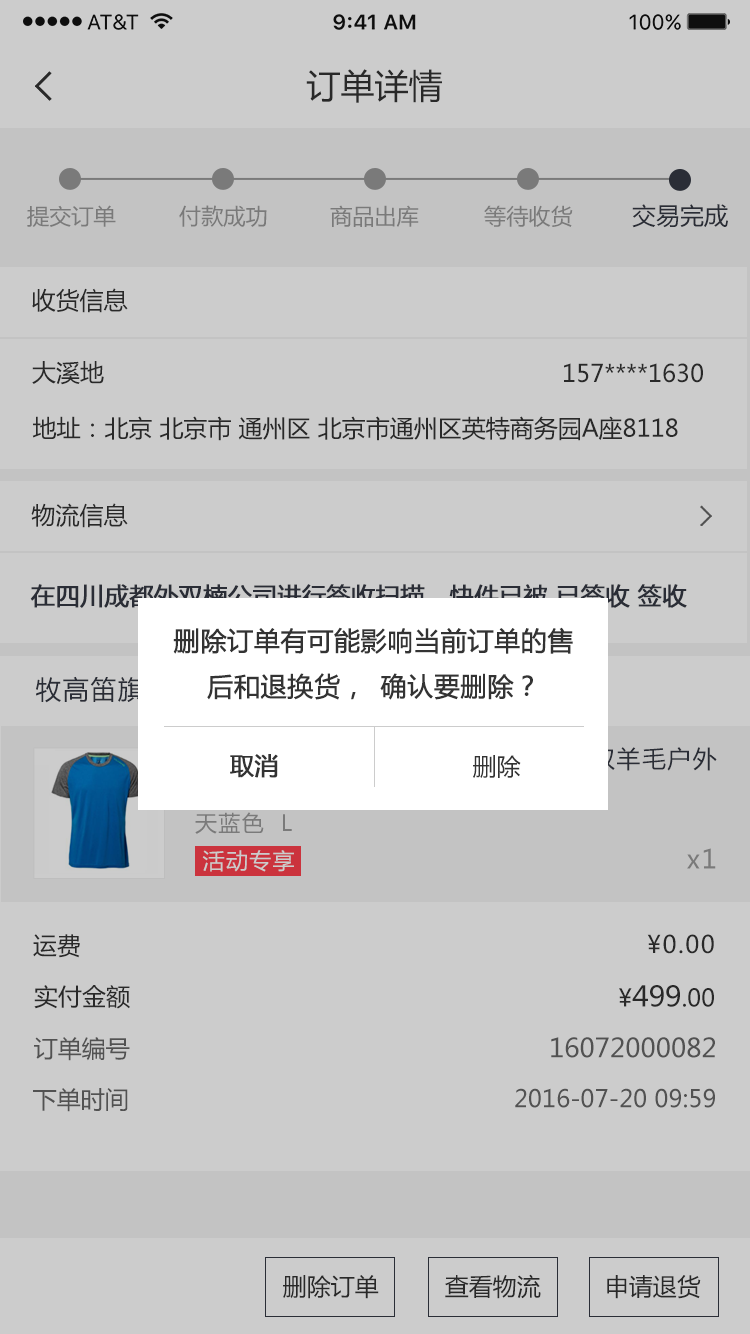
<style>
.page{position:relative;width:750px;height:1334px;background:#cccccc}
.page>*{position:absolute;margin:0}
.t1{font:34px "MicrosoftYaHei";color:#333333}
.t2{font:22px "MicrosoftYaHei";color:#7a7a7a}
.t3{font:23.8px "MicrosoftYaHei";color:#343843}
.t4{font:24px "MicrosoftYaHei";color:#333333}
.t5{font:24px "MicrosoftYaHei";color:#343843;font-weight:bold}
.t6{font:26px "MicrosoftYaHei";color:#333333;font-weight:bold}
.t7{font:26px "MicrosoftYaHei";letter-spacing:0.06em;color:#343843}
.t8{font:24px "MicrosoftYaHei";color:#333333;font-weight:bold}
.t9{font:22px "MicrosoftYaHei";letter-spacing:0.06em;color:#7a7a7a}
.t10{font:22px "MicrosoftYaHei";letter-spacing:0.06em;color:#cccccc}
.t11{font:26px "MicrosoftYaHei";letter-spacing:0.06em;color:#7a7a7a}
.t12{font:24px "MicrosoftYaHei";letter-spacing:0.06em;color:#333333}
.t13{font:28px "MicrosoftYaHei";color:#333333}
.t14{font:24px "MicrosoftYaHei";color:#666666}
.t15{font:26px "MicrosoftYaHei";color:#666666}
</style>
<div class="page">
<p class="t1" style="left:306px;top:69px;width:136px;height:34px">订单详情</p>
<p class="t2" style="left:27px;top:205px;width:89px;height:22px">提交订单</p>
<p class="t2" style="left:179px;top:205px;width:88px;height:22px">付款成功</p>
<p class="t2" style="left:330px;top:205px;width:89px;height:22px">商品出库</p>
<p class="t2" style="left:484px;top:205px;width:89px;height:22px">等待收货</p>
<p class="t3" style="left:632px;top:204px;width:96px;height:24px">交易完成</p>
<p class="t4" style="left:32px;top:288px;width:96px;height:25px">收货信息</p>
<p class="t4" style="left:32px;top:361px;width:72px;height:24px">大溪地</p>
<p class="t4" style="left:564px;top:363px;width:139px;height:20px">157****1630</p>
<p class="t4" style="left:32px;top:416px;width:646px;height:25px">地址：北京 北京市 通州区 北京市通州区英特商务园A座8118</p>
<p class="t4" style="left:31px;top:503px;width:97px;height:25px">物流信息</p>
<p class="t5" style="left:30px;top:584px;width:657px;height:24px">在四川成都外双楠公司进行签收扫描，快件已被 已签收 签收</p>
<p class="t6" style="left:173px;top:627px;width:400px;height:73px;text-align:center">删除订单有可能影响当前订单的售<br>后和退换货，确认要删除？</p>
<p class="t7" style="left:36px;top:676px;width:163px;height:27px">牧高笛旗舰店</p>
<p class="t8" style="left:230px;top:754px;width:48px;height:24px">取消</p>
<p class="t4" style="left:473px;top:755px;width:48px;height:23px">删除</p>
<p class="t9" style="left:195px;top:812px;width:97px;height:22px">天蓝色  L</p>
<p class="t10" style="left:202px;top:850px;width:92px;height:22px">活动专享</p>
<p class="t11" style="left:687px;top:848px;width:29px;height:21px">x1</p>
<p class="t4" style="left:33px;top:934px;width:47px;height:24px">运费</p>
<p class="t12" style="left:647px;top:934px;width:67px;height:20px">¥0.00</p>
<p class="t4" style="left:34px;top:985px;width:96px;height:24px">实付金额</p>
<p class="t13" style="left:619px;top:985px;width:95px;height:22px"><span class="t4">¥</span>499<span class="t4">.00</span></p>
<p class="t14" style="left:34px;top:1037px;width:96px;height:24px">订单编号</p>
<p class="t15" style="left:551px;top:1037px;width:164px;height:21px">16072000082</p>
<p class="t14" style="left:33px;top:1088px;width:95px;height:24px">下单时间</p>
<p class="t14" style="left:515px;top:1088px;width:200px;height:20px">2016-07-20 09:59</p>
<p class="t4" style="left:283px;top:1275px;width:96px;height:24px">删除订单</p>
<p class="t4" style="left:445px;top:1274px;width:96px;height:25px">查看物流</p>
<p class="t4" style="left:607px;top:1275px;width:94px;height:24px">申请退货</p>
</div>
